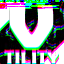
<style>
.page{position:relative;width:64px;height:64px;background:#ffffff}
.page>*{position:absolute;margin:0}
.t1{font:90.6px "BerlinSansFBDemi-Bold";color:#ffffff}
.t2{font:19.6px "BerlinSansFBDemi-Bold"}
</style>
<div class="page">
<p class="t1" style="left:9px;top:3px;width:45px;height:43px">v</p>
<p class="t2" style="left:4px;top:47px;width:55px;height:15px">TILITY</p>
</div>
